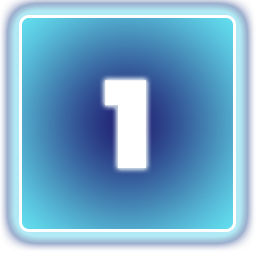
<style>
.page{position:relative;width:256px;height:256px}
.page>*{position:absolute;margin:0}
.t1{font:120px "Poppins-Black";color:#ffffff}
</style>
<div class="page">
<p class="t1" style="left:105px;top:80px;width:41px;height:88px">1</p>
</div>
